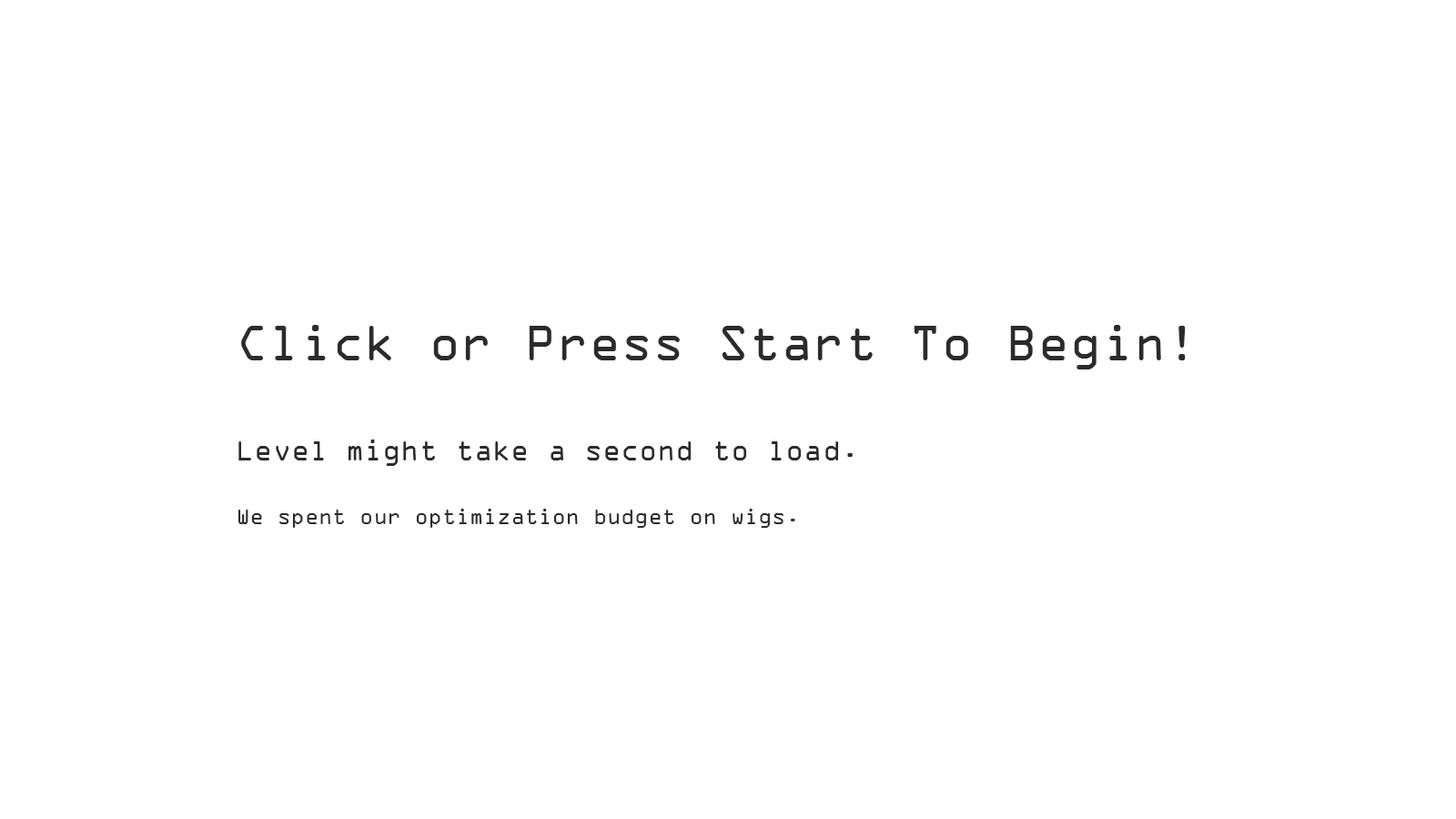
<style>
.page{position:relative;width:1456px;height:819px;background:#ffffff}
.page>*{position:absolute;margin:0}
.t1{font:22.7px "OCRAExtended";color:#2b2b2b}
.t2{font:53.1px "OCRAExtended";color:#2b2b2b}
.t3{font:30.3px "OCRAExtended";color:#2b2b2b}
</style>
<div class="page">
<p class="t1" style="left:238px;top:325px;width:948px;height:203px"><span class="t2">Click or Press Start To Begin!<br><br></span><span class="t3">Level might take a second to load.<br><br></span>We spent our optimization budget on wigs.</p>
</div>
